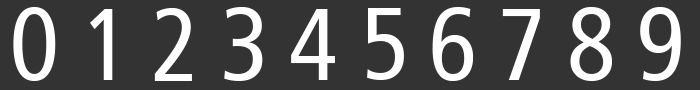
<style>
.page{position:relative;width:700px;height:90px;background:#333333}
.page>*{position:absolute;margin:0}
.t1{font:103px "Humanist777BT-RomanCondensedB";color:#ffffff}
</style>
<div class="page">
<p class="t1" style="left:13px;top:7px;width:43px;height:74px">0</p>
<p class="t1" style="left:90px;top:9px;width:23px;height:71px">1</p>
<p class="t1" style="left:154px;top:8px;width:38px;height:73px">2</p>
<p class="t1" style="left:224px;top:7px;width:39px;height:74px">3</p>
<p class="t1" style="left:291px;top:9px;width:44px;height:71px">4</p>
<p class="t1" style="left:367px;top:8px;width:37px;height:72px">5</p>
<p class="t1" style="left:432px;top:7px;width:42px;height:74px">6</p>
<p class="t1" style="left:502px;top:9px;width:38px;height:71px">7</p>
<p class="t1" style="left:570px;top:7px;width:42px;height:74px">8</p>
<p class="t1" style="left:640px;top:7px;width:41px;height:74px">9</p>
</div>
